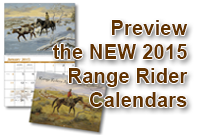
<style>
.page{position:relative;width:200px;height:138px;background:#ffffff}
.page>*{position:absolute;margin:0}
.t1{font:20.1px "Arial-BoldMT";color:#623300}
</style>
<div class="page">
<p class="t1" style="left:53px;top:20px;width:135px;height:87px;text-align:right">Preview<br>the NEW 2015<br>Range Rider<br>Calendars</p>
</div>
